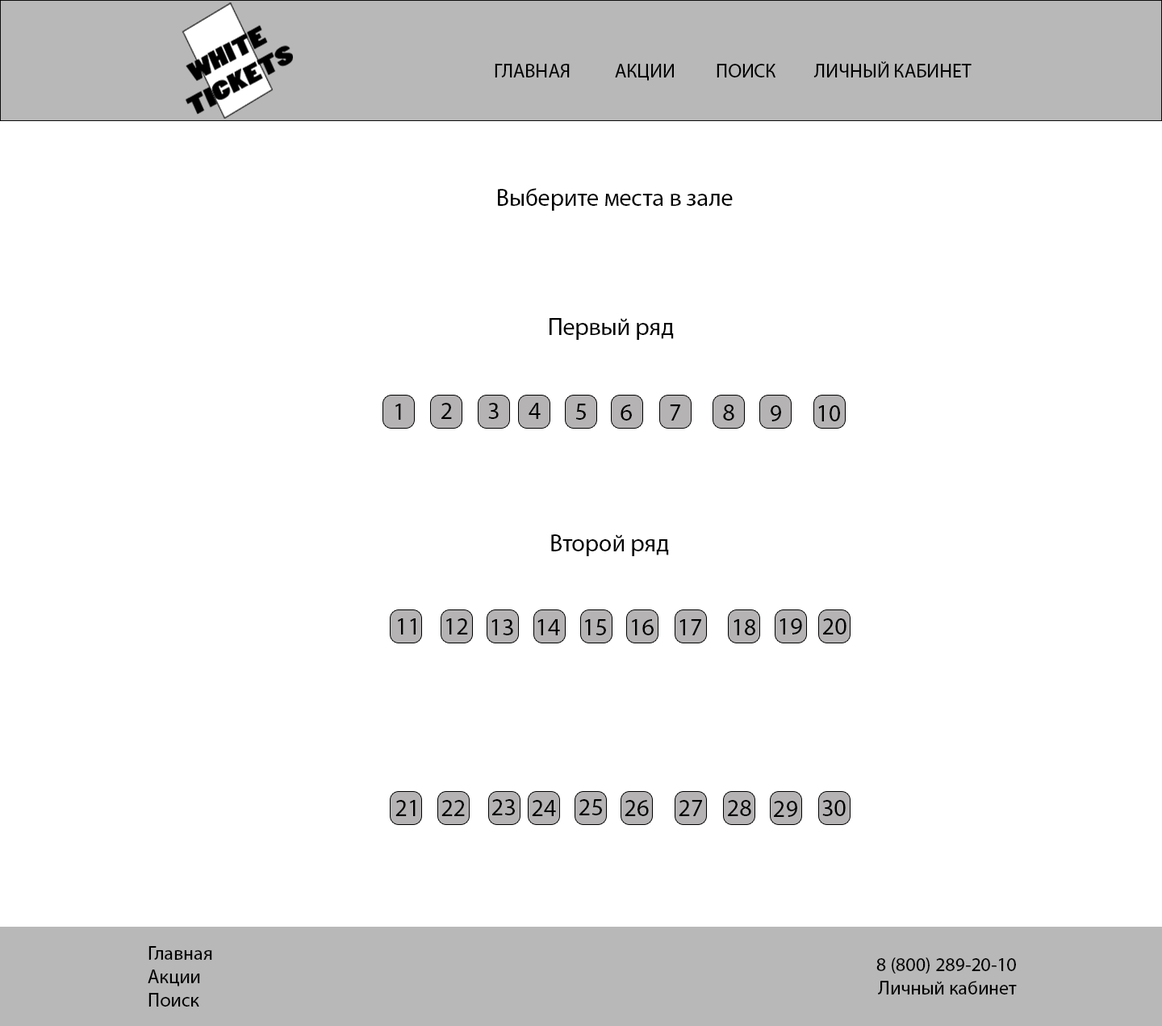
<style>
.page{position:relative;width:1162px;height:1026px;background:#ffffff}
.page>*{position:absolute;margin:0}
.t1{font:19.4px "MyriadPro-Regular";color:#000000}
.t2{font:24.2px "MyriadPro-Regular";color:#000000}
</style>
<div class="page">
<p class="t1" style="left:495px;top:64px;width:75px;height:13px">ГЛАВНАЯ</p>
<p class="t1" style="left:615px;top:64px;width:59px;height:17px">АКЦИИ</p>
<p class="t1" style="left:717px;top:64px;width:59px;height:13px">ПОИСК</p>
<p class="t1" style="left:814px;top:61px;width:158px;height:16px">ЛИЧНЫЙ КАБИНЕТ</p>
<p class="t2" style="left:498px;top:188px;width:235px;height:23px">Выберите места в зале</p>
<p class="t2" style="left:550px;top:318px;width:124px;height:22px">Первый ряд</p>
<p class="t2" style="left:396px;top:404px;width:5px;height:16px">1</p>
<p class="t2" style="left:442px;top:403px;width:10px;height:16px">2</p>
<p class="t2" style="left:488px;top:403px;width:11px;height:16px">3</p>
<p class="t2" style="left:529px;top:403px;width:12px;height:16px">4</p>
<p class="t2" style="left:576px;top:404px;width:10px;height:16px">5</p>
<p class="t2" style="left:621px;top:404px;width:11px;height:17px">6</p>
<p class="t2" style="left:670px;top:404px;width:10px;height:17px">7</p>
<p class="t2" style="left:723px;top:404px;width:12px;height:17px">8</p>
<p class="t2" style="left:771px;top:405px;width:10px;height:16px">9</p>
<p class="t2" style="left:818px;top:405px;width:22px;height:16px">10</p>
<p class="t2" style="left:551px;top:534px;width:118px;height:22px">Второй ряд</p>
<p class="t2" style="left:398px;top:618px;width:18px;height:16px">11</p>
<p class="t2" style="left:446px;top:618px;width:22px;height:16px">12</p>
<p class="t2" style="left:492px;top:619px;width:21px;height:16px">13</p>
<p class="t2" style="left:538px;top:619px;width:22px;height:16px">14</p>
<p class="t2" style="left:585px;top:619px;width:21px;height:16px">15</p>
<p class="t2" style="left:632px;top:619px;width:22px;height:16px">16</p>
<p class="t2" style="left:680px;top:619px;width:21px;height:16px">17</p>
<p class="t2" style="left:734px;top:619px;width:22px;height:16px">18</p>
<p class="t2" style="left:780px;top:618px;width:22px;height:16px">19</p>
<p class="t2" style="left:823px;top:618px;width:24px;height:16px">20</p>
<p class="t2" style="left:396px;top:800px;width:20px;height:16px">21</p>
<p class="t2" style="left:442px;top:800px;width:23px;height:16px">22</p>
<p class="t2" style="left:492px;top:799px;width:23px;height:16px">23</p>
<p class="t2" style="left:532px;top:800px;width:24px;height:16px">24</p>
<p class="t2" style="left:580px;top:799px;width:22px;height:16px">25</p>
<p class="t2" style="left:625px;top:800px;width:24px;height:16px">26</p>
<p class="t2" style="left:679px;top:800px;width:23px;height:16px">27</p>
<p class="t2" style="left:728px;top:800px;width:23px;height:16px">28</p>
<p class="t2" style="left:774px;top:801px;width:23px;height:16px">29</p>
<p class="t2" style="left:823px;top:800px;width:23px;height:16px">30</p>
<p class="t1" style="left:148px;top:946px;width:64px;height:61px">Главная<br>Акции<br>Поиск</p>
<p class="t1" style="left:877px;top:957px;width:140px;height:37px;text-align:right">8 (800) 289-20-10<br>Личный кабинет</p>
</div>
